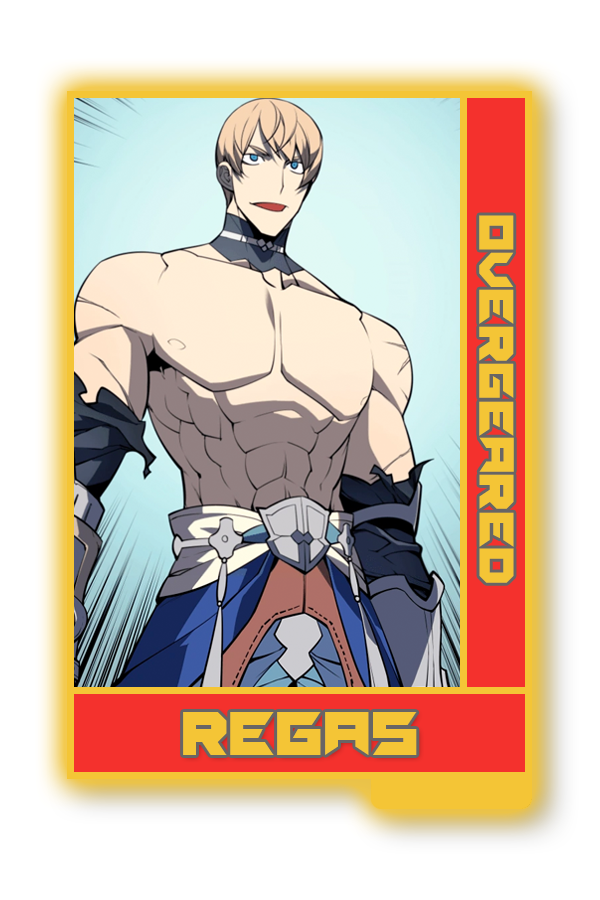
<style>
.page{position:relative;width:600px;height:900px;background:#ffffff}
.page>*{position:absolute;margin:0}
.t1{font:48.8px "Suggested-Regular";color:#f4c536}
.t2{font:62.5px "Suggested-Regular";color:#f4c536}
</style>
<div class="page">
<p class="t1" style="left:479px;top:215px;width:35px;height:368px;rotate:90deg">OVERGEARED</p>
<p class="t2" style="left:183px;top:712px;width:234px;height:43px">REGAS</p>
</div>
